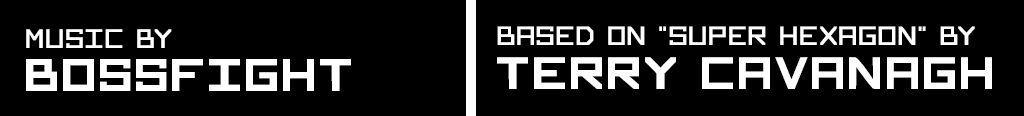
<style>
.page{position:relative;width:1024px;height:116px;background:#000000}
.page>*{position:absolute;margin:0}
.t1{font:29.2px "OpenSquare-Regular";color:#ffffff}
.t2{font:29px "OpenSquare-Regular";color:#ffffff}
.t3{font:50px "OpenSquare-Bold";color:#ffffff}
.t4{font:49.7px "OpenSquare-Bold";color:#ffffff}
</style>
<div class="page">
<p class="t1" style="left:26px;top:29px;width:146px;height:19px">Music by</p>
<p class="t2" style="left:497px;top:26px;width:478px;height:19px">Based on "Super Hexagon" by</p>
<p class="t3" style="left:26px;top:59px;width:325px;height:32px">BOSSFIGHT</p>
<p class="t4" style="left:497px;top:57px;width:495px;height:32px">TERRY CAVANAGH</p>
</div>
